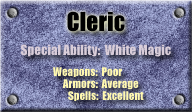
<style>
.page{position:relative;width:192px;height:112px}
.page>*{position:absolute;margin:0}
.t1{font:24px "Impact";color:#000000}
.t2{font:13px "Impact";color:#d9cdd9}
.t3{font:11px "Impact";color:#fff8b0}
</style>
<div class="page">
<p class="t1" style="left:67px;top:11px;width:58px;height:21px">Cleric</p>
<p class="t2" style="left:21px;top:44px;width:150px;height:13px">Special Ability:  White Magic</p>
<p class="t3" style="left:53px;top:67px;width:69px;height:10px">Weapons:  Poor</p>
<p class="t3" style="left:62px;top:79px;width:77px;height:11px">Armors:  Average</p>
<p class="t3" style="left:68px;top:91px;width:76px;height:10px">Spells:  Excellent</p>
</div>
